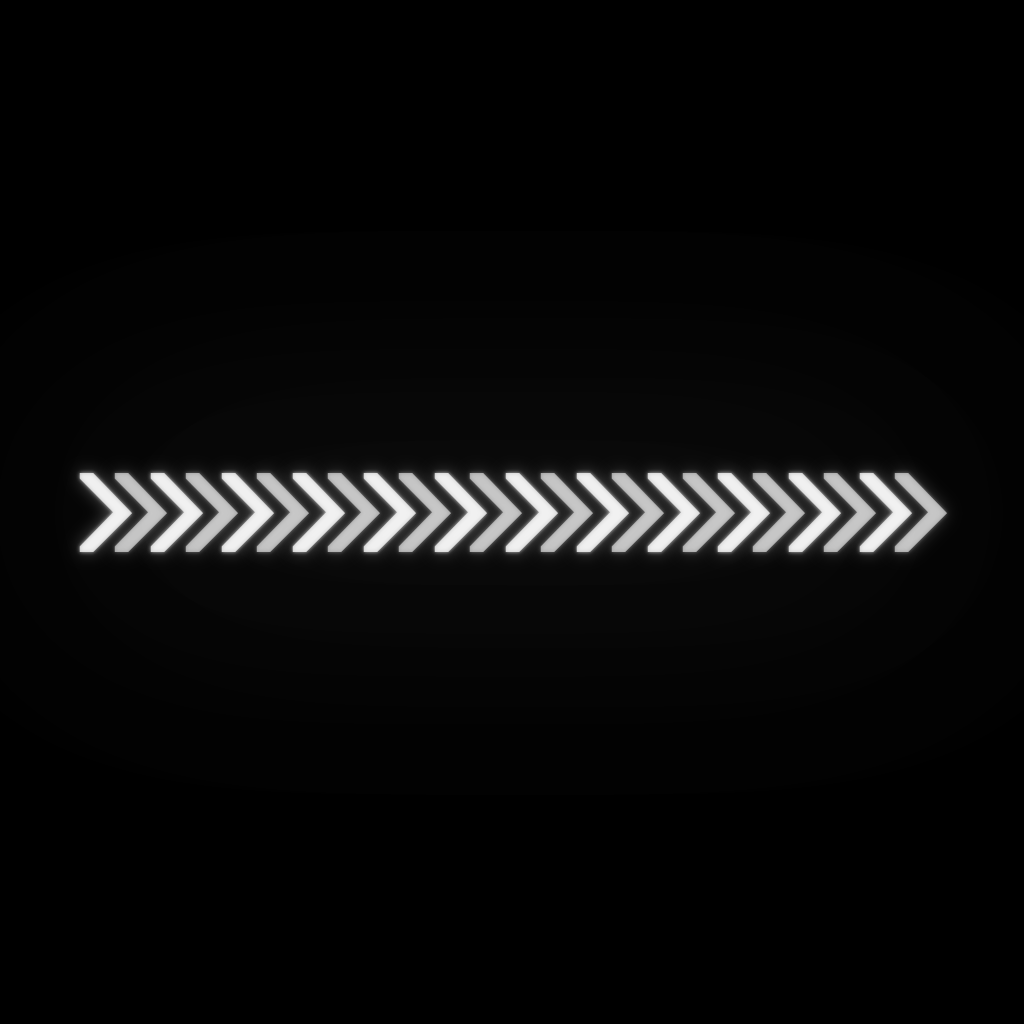
<style>
.page{position:relative;width:1024px;height:1024px;background:#000000}
.page>*{position:absolute;margin:0}
.t1{font:129px "FixedsysTTF";color:#ffffff}
.t2{font:129px "FixedsysTTF";color:#c4c4c4}
</style>
<div class="page">
<p class="t1" style="left:79px;top:473px;width:833px;height:79px;opacity:0.6">&gt;&gt;&gt;&gt;&gt;&gt;&gt;&gt;&gt;&gt;&gt;&gt;</p>
<p class="t2" style="left:114px;top:473px;width:833px;height:79px">&gt;&gt;&gt;&gt;&gt;&gt;&gt;&gt;&gt;&gt;&gt;&gt;</p>
</div>
